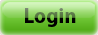
<style>
.page{position:relative;width:98px;height:35px}
.page>*{position:absolute;margin:0}
.t1{font:21px "MyriadPro-Bold"}
</style>
<div class="page">
<p class="t1" style="left:25px;top:8px;width:51px;height:19px">Login</p>
</div>
